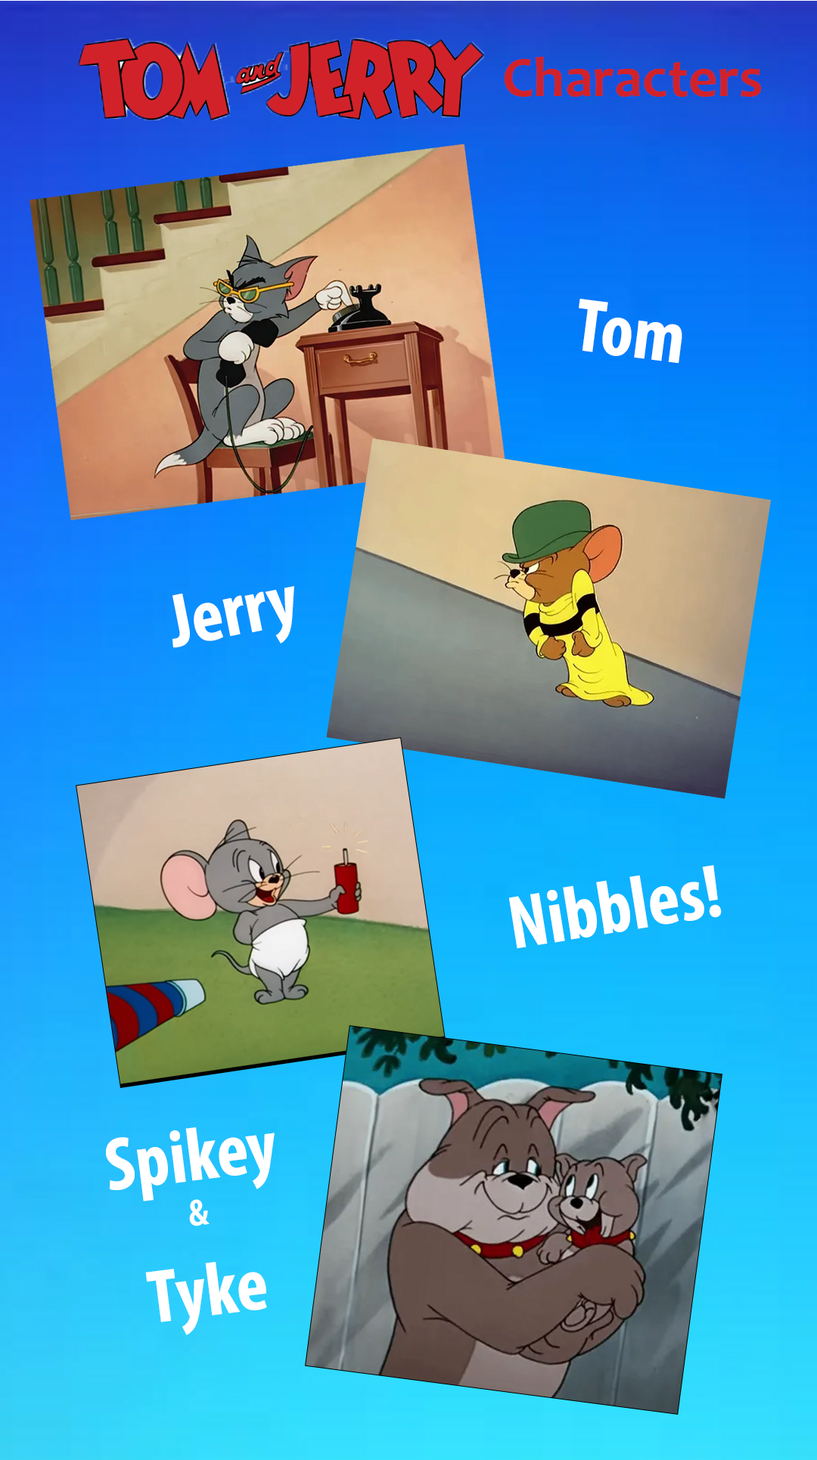
<style>
.page{position:relative;width:817px;height:1460px}
.page>*{position:absolute;margin:0}
.t1{font:56.7px "Candara-Bold";color:#d1222a}
.t2{font:75.6px "MyriadPro-BoldCond";color:#ffffff}
.t3{font:37.8px "MyriadPro-BoldCond";color:#ffffff}
</style>
<div class="page">
<p class="t1" style="left:504px;top:57px;width:257px;height:40px">Characters</p>
<p class="t2" style="left:578px;top:299px;width:104px;height:65px;rotate:7deg">Tom</p>
<p class="t2" style="left:172px;top:586px;width:122px;height:62px;rotate:-11deg">Jerry</p>
<p class="t2" style="left:509px;top:865px;width:212px;height:84px;rotate:-9deg">Nibbles!</p>
<p class="t2" style="left:106px;top:1127px;width:168px;height:208px;text-align:center;rotate:-7deg">Spikey<br><span class="t3">&amp;<br></span>Tyke</p>
</div>
